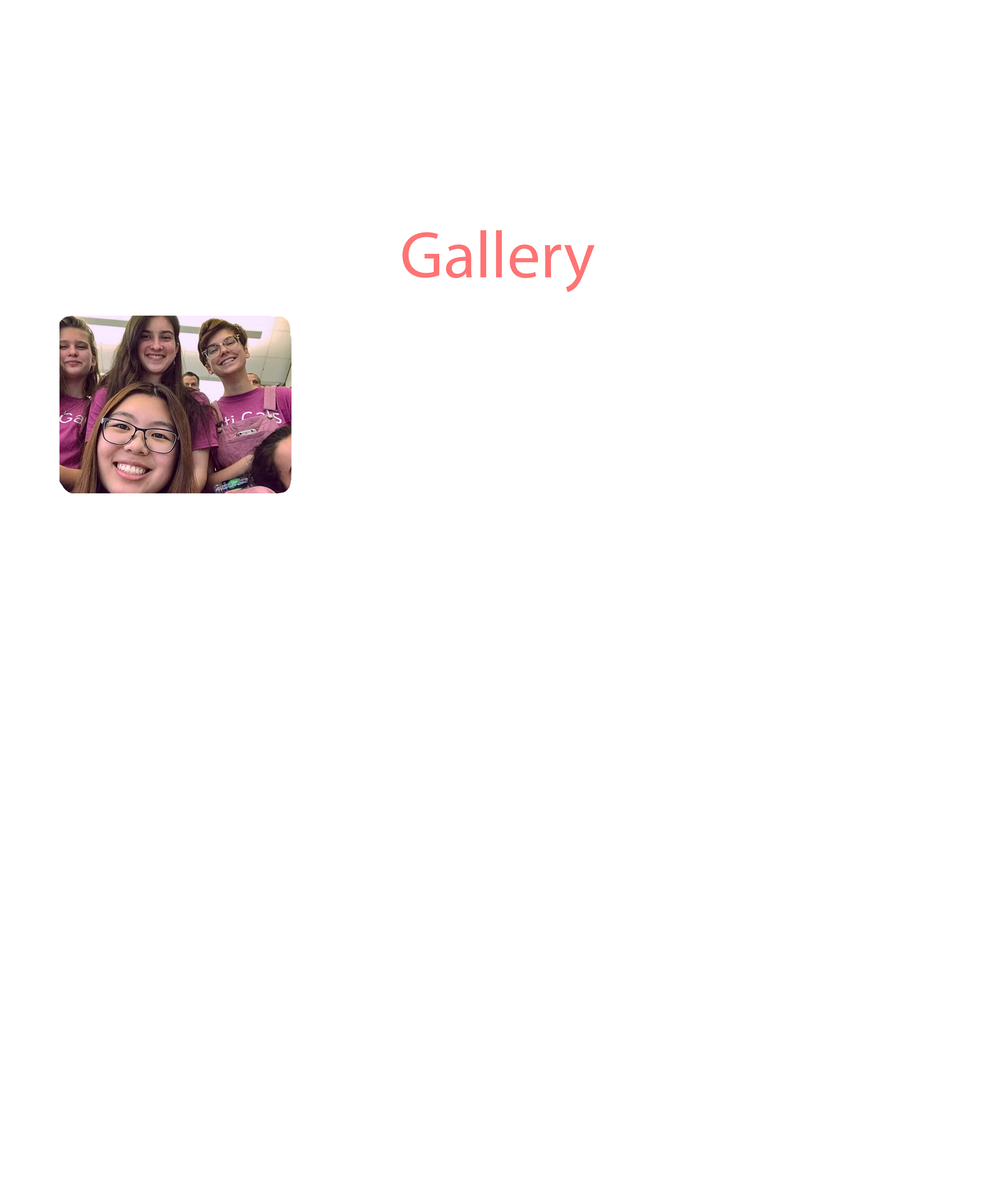
<style>
.page{position:relative;width:997px;height:1196px;background:#ffffff}
.page>*{position:absolute;margin:0}
.t1{font:66.5px "MyriadPro-Regular";color:#ff7474}
.t2{font:66.5px "MyriadPro-Regular";color:#000000}
</style>
<div class="page">
<p class="t1" style="left:402px;top:230px;width:192px;height:62px"><span class="t2"><br></span>Gallery</p>
</div>
